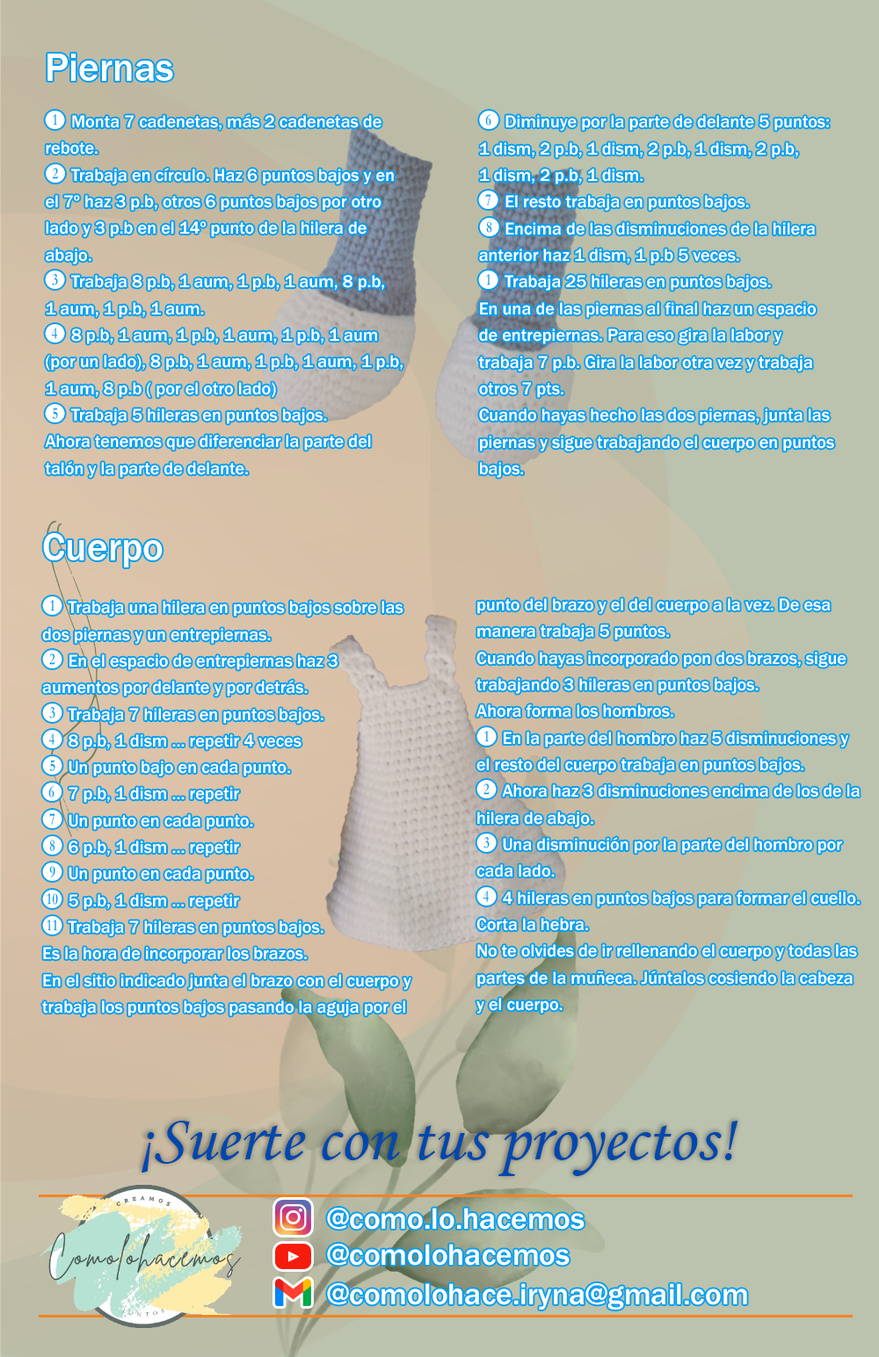
<style>
.page{position:relative;width:879px;height:1357px;background:#bbc2ad}
.page>*{position:absolute;margin:0}
.t1{font:40.1px "FranklinGothic-Medium";color:#ffffff}
.t2{font:17.8px/26.7px "FranklinGothic-Medium";color:#ffffff}
.t3{font:17.8px/26.7px "Numberpile-Regular";color:#ffffff}
.t4{font:40px "FranklinGothic-Medium";color:#ffffff}
.t5{font:17.8px/26.6px "FranklinGothic-Medium";color:#ffffff}
.t6{font:17.8px/26.6px "Numberpile-Regular";color:#ffffff}
.t7{font:66.3px "MonotypeCorsiva";color:#0048ad}
.t8{font:30.8px "FranklinGothic-Medium";color:#ffffff}
</style>
<div class="page">
<p class="t1" style="left:47px;top:54px;width:126px;height:27px">Piernas</p>
<p class="t2" style="left:45px;top:111px;width:357px;height:367px"><span class="t3">B </span>Monta 7 cadenetas, más 2 cadenetas de <br>rebote.<br><span class="t3">C </span>Trabaja en círculo. Haz 6 puntos bajos y en <br>el 7º haz 3 p.b, otros 6 puntos bajos por otro <br>lado y 3 p.b en el 14º punto de la hilera de <br>abajo.<br><span class="t3">D </span>Trabaja 8 p.b, 1 aum, 1 p.b, 1 aum, 8 p.b, <br>1 aum, 1 p.b, 1 aum.<br><span class="t3">E </span>8 p.b, 1 aum, 1 p.b, 1 aum, 1 p.b, 1 aum <br>(por un lado), 8 p.b, 1 aum, 1 p.b, 1 aum, 1 p.b, <br>1 aum, 8 p.b ( por el otro lado)<br><span class="t3">F </span>Trabaja 5 hileras en puntos bajos.<br>Ahora tenemos que diferenciar la parte del <br>talón y la parte de delante.</p>
<p class="t2" style="left:478px;top:111px;width:356px;height:367px"><span class="t3">G </span>Diminuye por la parte de delante 5 puntos:<br>1 dism, 2 p.b, 1 dism, 2 p.b, 1 dism, 2 p.b, <br>1 dism, 2 p.b, 1 dism.<br><span class="t3">H </span>El resto trabaja en puntos bajos.<br><span class="t3">I </span>Encima de las disminuciones de la hilera <br>anterior haz 1 dism, 1 p.b 5 veces.<br><span class="t3">B </span>Trabaja 25 hileras en puntos bajos.<br>En una de las piernas al final haz un espacio <br>de entrepiernas. Para eso gira la labor y <br>trabaja 7 p.b. Gira la labor otra vez y trabaja <br>otros 7 pts.<br>Cuando hayas hecho las dos piernas, junta las <br>piernas y sigue trabajando el cuerpo en puntos <br>bajos.</p>
<p class="t4" style="left:43px;top:533px;width:120px;height:35px">Cuerpo</p>
<p class="t5" style="left:42px;top:597px;width:369px;height:419px"><span class="t6">B </span>Trabaja una hilera en puntos bajos sobre las <br>dos piernas y un entrepiernas.<br><span class="t6">C </span>En el espacio de entrepiernas haz 3 <br>aumentos por delante y por detrás.<br><span class="t6">D </span>Trabaja 7 hileras en puntos bajos.<br><span class="t6">E </span>8 p.b, 1 dism … repetir 4 veces<br><span class="t6">F </span>Un punto bajo en cada punto.<br><span class="t6">G </span>7 p.b, 1 dism … repetir<br><span class="t6">H </span>Un punto en cada punto.<br><span class="t6">I </span>6 p.b, 1 dism … repetir<br><span class="t6">J </span>Un punto en cada punto.<br><span class="t6">K </span>5 p.b, 1 dism ... repetir<br><span class="t6">L </span>Trabaja 7 hileras en puntos bajos.<br>Es la hora de incorporar los brazos.<br>En el sitio indicado junta el brazo con el cuerpo y<br>trabaja los puntos bajos pasando la aguja por el</p>
<p class="t5" style="left:476px;top:598px;width:383px;height:416px">punto del brazo y el del cuerpo a la vez. De esa <br>manera trabaja 5 puntos.<br>Cuando hayas incorporado pon dos brazos, sigue <br>trabajando 3 hileras en puntos bajos.<br>Ahora forma los hombros. <br><span class="t6">B </span>En la parte del hombro haz 5 disminuciones y <br>el resto del cuerpo trabaja en puntos bajos.<br><span class="t6">C </span>Ahora haz 3 disminuciones encima de los de la <br>hilera de abajo.<br><span class="t6">D </span>Una disminución por la parte del hombro por <br>cada lado.<br><span class="t6">E </span>4 hileras en puntos bajos para formar el cuello.<br>Corta la hebra.<br>No te olvides de ir rellenando el cuerpo y todas las <br>partes de la muñeca. Júntalos cosiendo la cabeza <br>y el cuerpo.</p>
<p class="t7" style="left:141px;top:1121px;width:597px;height:55px">¡Suerte con tus proyectos!</p>
<p class="t8" style="left:327px;top:1208px;width:257px;height:22px">@como.lo.hacemos</p>
<p class="t8" style="left:327px;top:1244px;width:242px;height:22px">@comolohacemos</p>
<p class="t8" style="left:327px;top:1284px;width:420px;height:26px">@comolohace.iryna@gmail.com</p>
</div>
